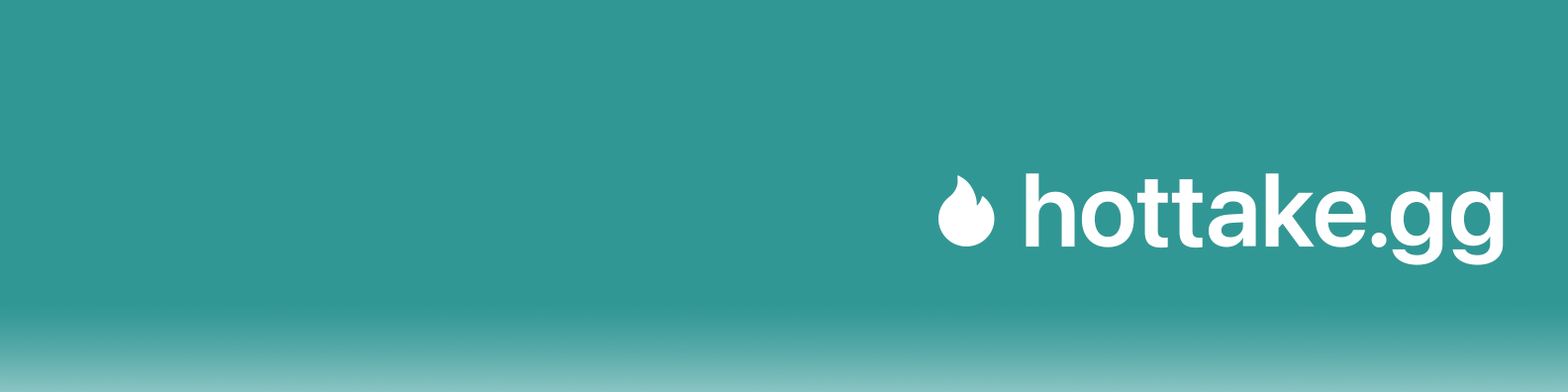
<style>
.page{position:relative;width:1568px;height:392px;background:#319795}
.page>*{position:absolute;margin:0}
.t1{font:103.5px "SFPro-Semibold";color:#ffffff}
</style>
<div class="page">
<p class="t1" style="left:1026px;top:173px;width:478px;height:92px">hottake.gg</p>
</div>
